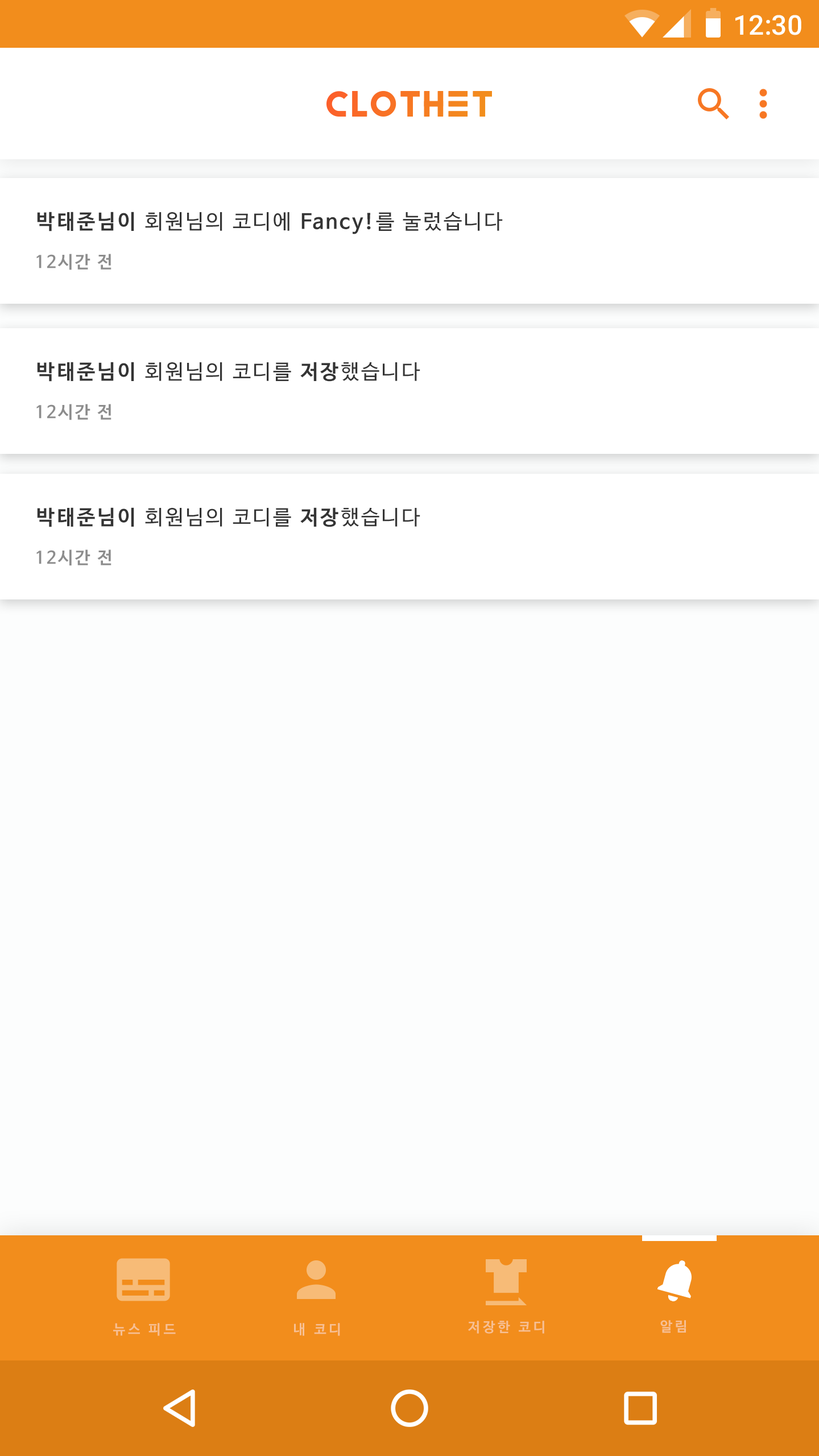
<style>
.page{position:relative;width:819px;height:1456px;background:#fcfdfd}
.page>*{position:absolute;margin:0}
.t1{font:27.3px "Roboto-Medium";color:#ffffff}
.t2{font:20.5px "NanumBarunGothic";letter-spacing:0.1em;color:#343434}
.t3{font:20.5px "NanumBarunGothicBold";letter-spacing:0.1em;color:#343434}
.t4{font:17.1px "NanumBarunGothicBold";letter-spacing:0.1em;color:#8d8d8d}
.t5{font:13.6px "NanumBarunGothicBold";letter-spacing:0.2em;color:#f7c093}
</style>
<div class="page">
<p class="t1" style="left:735px;top:15px;width:66px;height:20px">12:30</p>
<p class="t2" style="left:37px;top:212px;width:466px;height:22px"><span class="t3">박태준님이 </span>회원님의 코디에<span class="t3"> Fancy!</span>를 눌렀습니다</p>
<p class="t4" style="left:36px;top:254px;width:75px;height:16px">12시간 전</p>
<p class="t2" style="left:37px;top:362px;width:383px;height:20px"><span class="t3">박태준님이 </span>회원님의 코디를 <span class="t3">저장</span>했습니다</p>
<p class="t4" style="left:36px;top:404px;width:75px;height:16px">12시간 전</p>
<p class="t2" style="left:37px;top:507px;width:383px;height:20px"><span class="t3">박태준님이 </span>회원님의 코디를 <span class="t3">저장</span>했습니다</p>
<p class="t4" style="left:36px;top:549px;width:75px;height:17px">12시간 전</p>
<p class="t5" style="left:113px;top:1323px;width:63px;height:13px">뉴스 피드</p>
<p class="t5" style="left:294px;top:1323px;width:46px;height:13px">내 코디</p>
<p class="t5" style="left:468px;top:1321px;width:76px;height:13px">저장한 코디</p>
<p class="t5" style="left:660px;top:1320px;width:26px;height:13px">알림</p>
</div>
